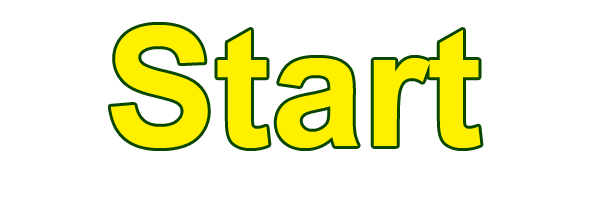
<style>
.page{position:relative;width:600px;height:200px;background:#ffffff}
.page>*{position:absolute;margin:0}
.t1{font:165.5px "Arial-BoldMT";color:#fff000}
</style>
<div class="page">
<p class="t1" style="left:110px;top:25px;width:371px;height:123px">Start</p>
</div>
